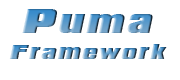
<style>
.page{position:relative;width:180px;height:80px;background:#ffffff}
.page>*{position:absolute;margin:0}
.t1{font:30px "PadalomaItalic";letter-spacing:0.09em}
.t2{font:18px "PadalomaItalic";letter-spacing:0.09em}
</style>
<div class="page">
<p class="t1" style="left:22px;top:9px;width:131px;height:24px">Puma</p>
<p class="t2" style="left:9px;top:44px;width:158px;height:15px">Framework</p>
</div>
